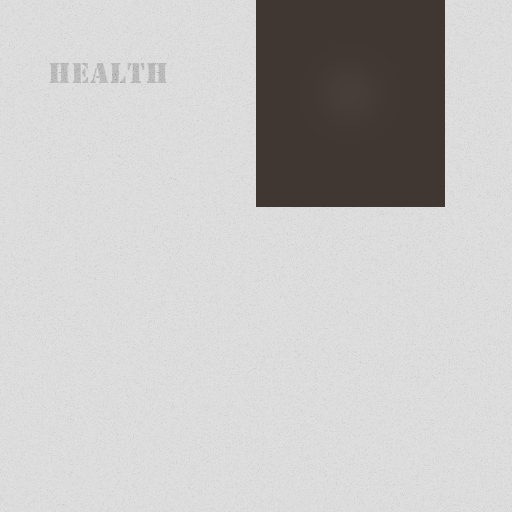
<style>
.page{position:relative;width:512px;height:512px}
.page>*{position:absolute;margin:0}
.t1{font:30px "Stencil";letter-spacing:0.035em;color:#bdbcbd}
</style>
<div class="page">
<p class="t1" style="left:49px;top:63px;width:118px;height:20px">Health</p>
</div>
